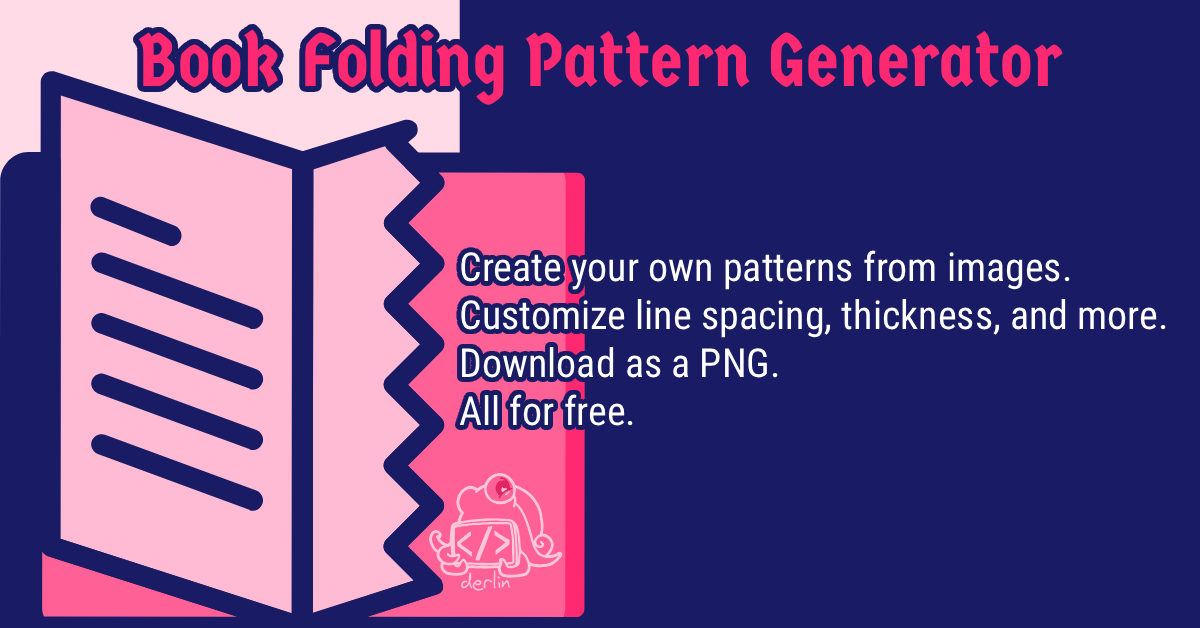
<style>
.page{position:relative;width:1200px;height:628px;background:#1a1b65}
.page>*{position:absolute;margin:0}
.t1{font:75.3px "GermaniaOne-Regular";color:#ff2972}
.t2{font:40px "RobotoCondensed-Regular";color:#ffffff}
.t3{font:20.1px "Virgil3YOFF";color:#ffc5d9}
</style>
<div class="page">
<p class="t1" style="left:138px;top:29px;width:925px;height:76px">Book Folding Pattern Generator</p>
<p class="t2" style="left:459px;top:250px;width:707px;height:176px">Create your own patterns from images.<br>Customize line spacing, thickness, and more.<br>Download as a PNG.<br>All for free.</p>
<p class="t3" style="left:461px;top:570px;width:49px;height:21px">derlin</p>
</div>
